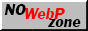
<style>
.page{position:relative;width:88px;height:31px;background:#bdbdbd}
.page>*{position:absolute;margin:0}
.t1{font:16px "FranklinGothicITALIC";color:#000000}
.t2{font:16px "FranklinGothicITALIC";color:#ff0000}
</style>
<div class="page">
<p class="t1" style="left:4px;top:4px;width:22px;height:11px">NO</p>
<p class="t2" style="left:25px;top:8px;width:40px;height:11px">WebP</p>
<p class="t1" style="left:47px;top:19px;width:34px;height:8px">zone</p>
</div>
